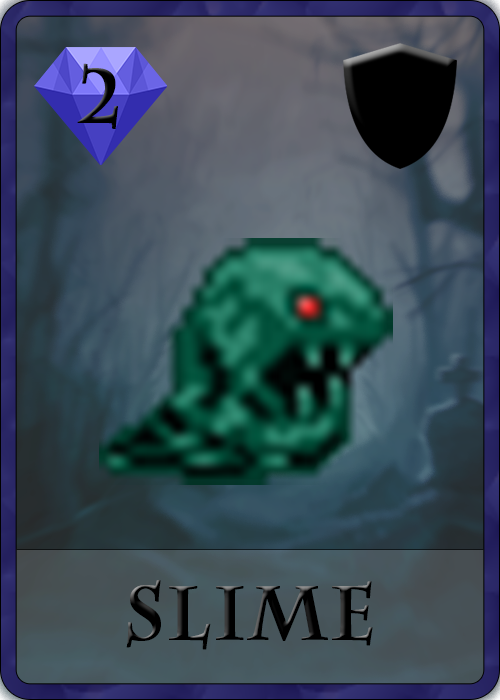
<style>
.page{position:relative;width:500px;height:700px}
.page>*{position:absolute;margin:0}
.t1{font:75px "CharlemagneStd-Bold";color:#000000;font-weight:bold}
</style>
<div class="page">
<p class="t1" style="left:77px;top:63px;width:41px;height:66px">2</p>
<p class="t1" style="left:126px;top:580px;width:247px;height:70px">Slime</p>
</div>
